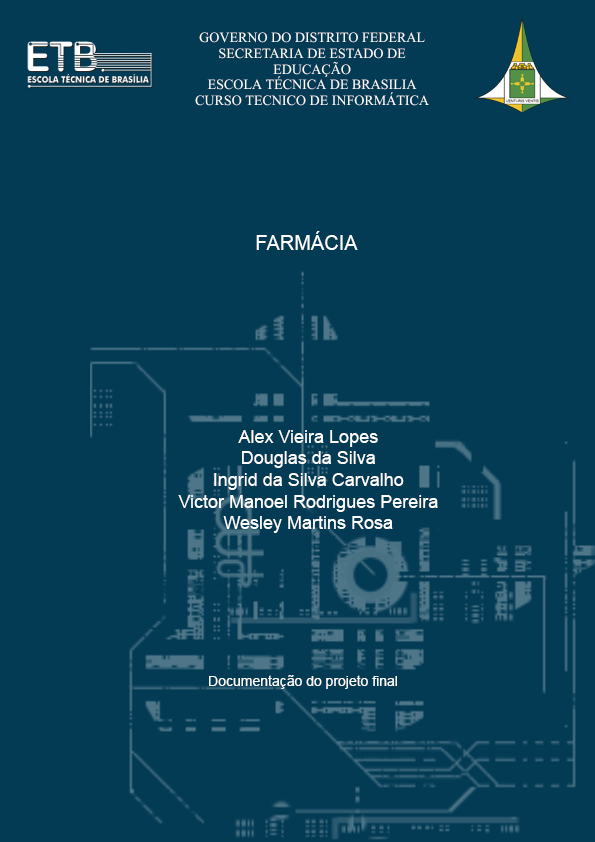
<style>
.page{position:relative;width:595px;height:842px;background:#033b55}
.page>*{position:absolute;margin:0}
.t1{font:14px "TimesNewRomanPSMT";color:#ffffff}
.t2{font:20px "ArialMT";color:#ffffff}
.t3{font:36px "Arial-BoldMT";color:#ffffff}
.t4{font:18px "ArialMT";color:#ffffff}
.t5{font:24px "MyriadPro-Regular";color:#ffffff}
.t6{font:14px "ArialMT";color:#ffffff}
</style>
<div class="page">
<p class="t1" style="left:195px;top:32px;width:234px;height:74px;text-align:center">Governo do distrito federal<br>Secretaria de estado de<br>educação<br>Escola técnica de brasilia<br>Curso tecnico de informática</p>
<p class="t2" style="left:256px;top:231px;width:102px;height:19px"><span class="t3"><br></span>FARMÁCIA</p>
<p class="t4" style="left:178px;top:430px;width:260px;height:103px;text-align:center"><span class="t5"><br></span><br>Alex Vieira Lopes<br>Douglas da Silva<br>Ingrid da Silva Carvalho<br>Victor Manoel Rodrigues Pereira<br>Wesley Martins Rosa</p>
<p class="t6" style="left:209px;top:675px;width:188px;height:14px">Documentação do projeto final</p>
</div>
